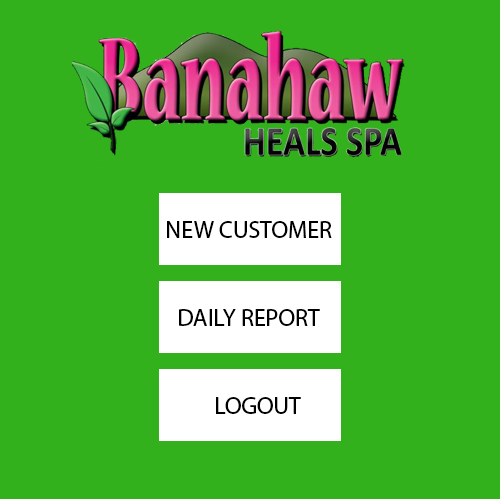
<style>
.page{position:relative;width:500px;height:500px;background:#32b11c}
.page>*{position:absolute;margin:0}
.t1{font:24px "MyriadHebrew-Regular";color:#000000}
</style>
<div class="page">
<p class="t1" style="left:167px;top:221px;width:165px;height:17px">NEW CUSTOMER</p>
<p class="t1" style="left:179px;top:309px;width:141px;height:17px">DAILY REPORT</p>
<p class="t1" style="left:216px;top:397px;width:85px;height:17px">LOGOUT</p>
</div>
